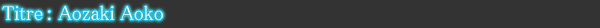
<style>
.page{position:relative;width:600px;height:28px;background:#333333}
.page>*{position:absolute;margin:0}
.t1{font:20px "MS-PMincho";color:#ffffff}
</style>
<div class="page">
<p class="t1" style="left:2px;top:5px;width:161px;height:16px">Titre : Aozaki Aoko</p>
</div>
